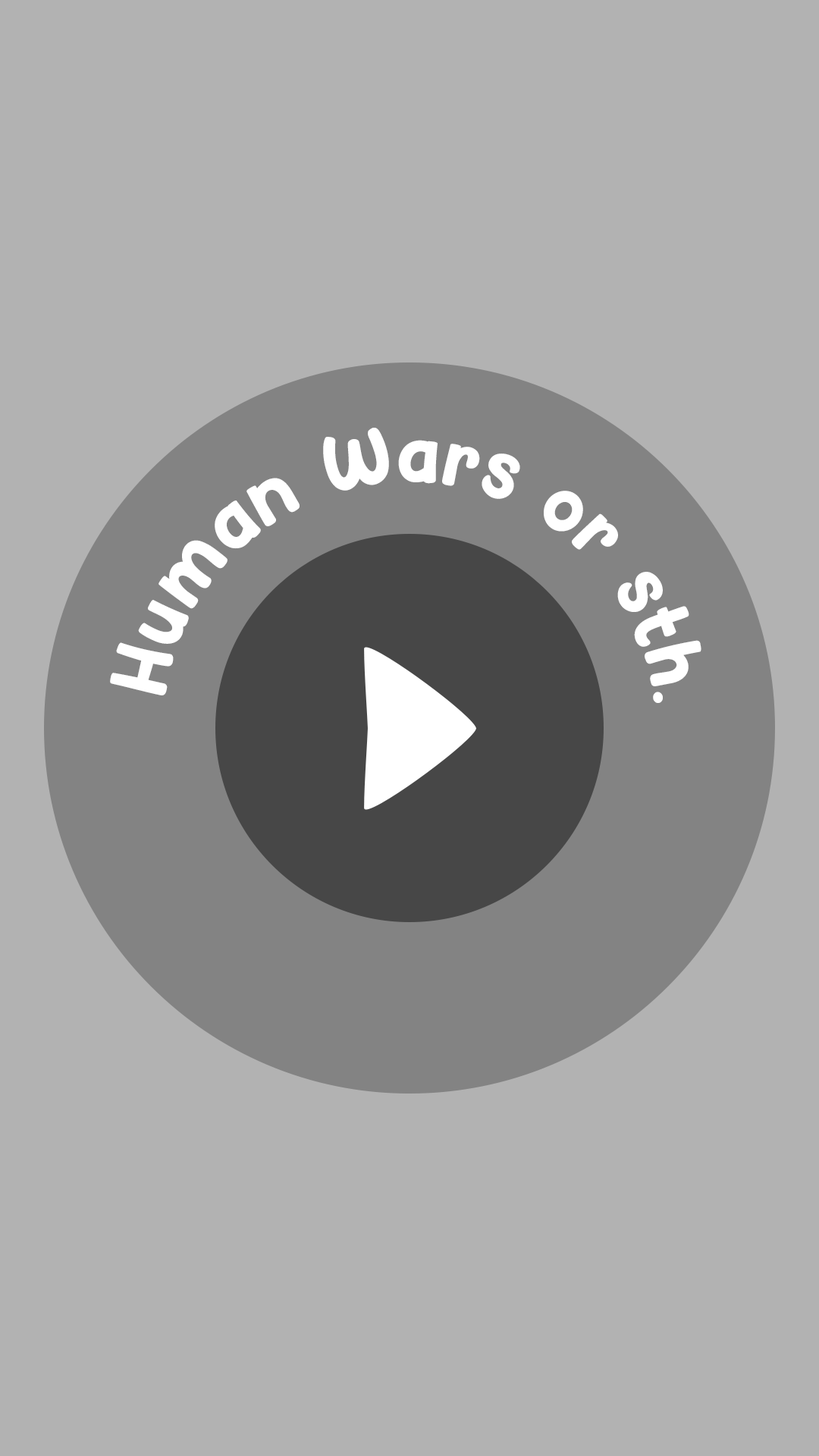
<style>
.page{position:relative;width:819px;height:1456px;background:#b2b2b2}
.page>*{position:absolute;margin:0}
.t1{font:75.8px "Hey-Comic";color:#ffffff}
</style>
<div class="page">
<p class="t1" style="left:110px;top:428px;width:591px;height:275px">Human Wars or sth. idk.</p>
</div>
